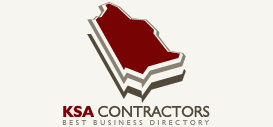
<style>
.page{position:relative;width:273px;height:127px;background:#f7f5ef}
.page>*{position:absolute;margin:0}
.t1{font:15.6px "Humanist521BT-Roman";color:#52493a;text-transform:uppercase}
.t2{font:15.6px "Humanist521BT-Bold";color:#780303;text-transform:uppercase}
.t3{font:6.9px "Humanist521BT-Roman";letter-spacing:0.4em;color:#888174;text-transform:uppercase}
</style>
<div class="page">
<p class="t1" style="left:63px;top:105px;width:147px;height:12px"><span class="t2">KSA </span>Contractors</p>
<p class="t3" style="left:62px;top:120px;width:148px;height:5px">Best Business Directory</p>
</div>
